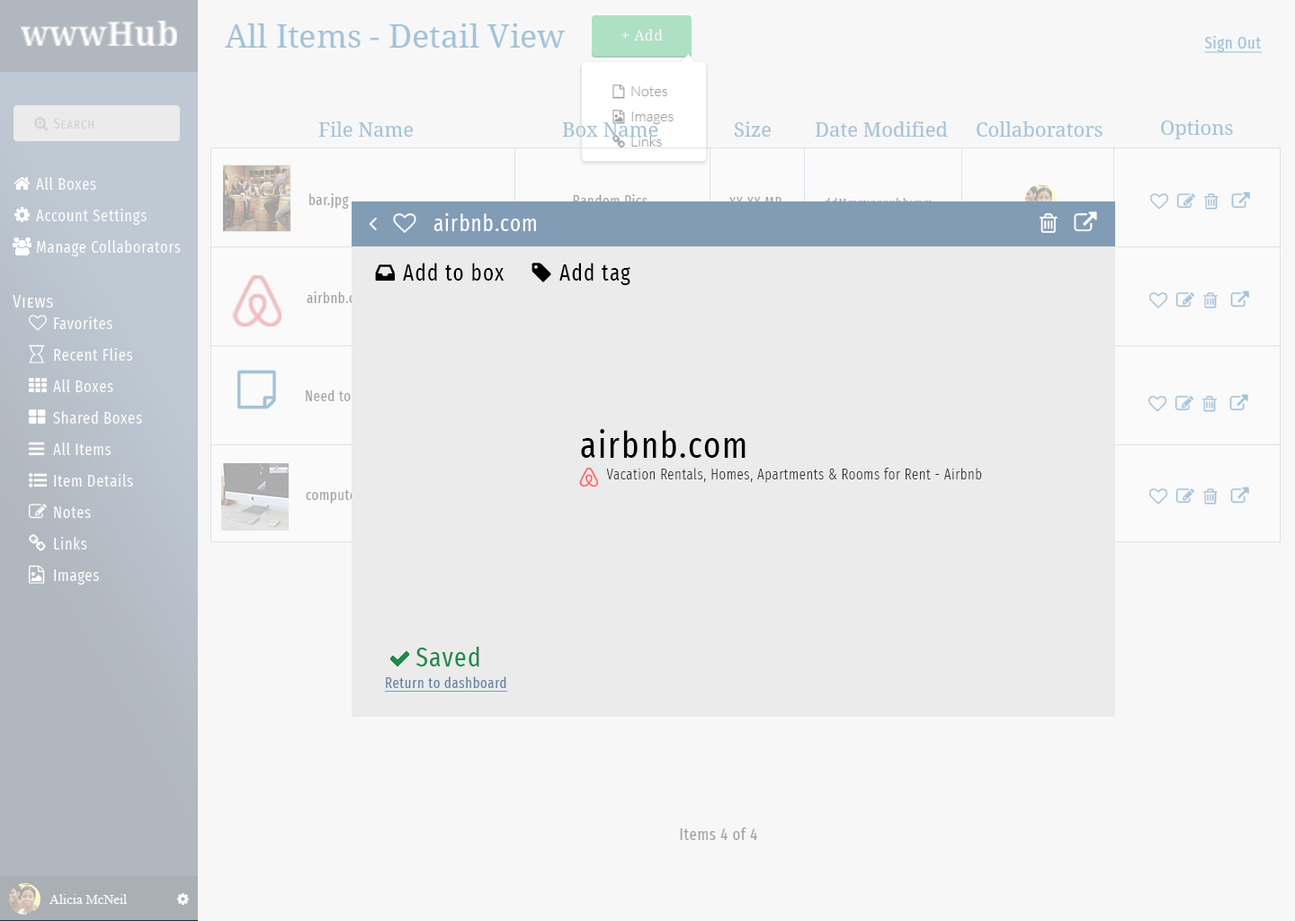
<style>
.page{position:relative;width:1295px;height:921px;background:#f7f7f7}
.page>*{position:absolute;margin:0}
.t1{font:32.4px "DroidSerif";color:#9fc4dc}
.t2{font:14.4px "DroidSerif";letter-spacing:0.04em;color:#ffffff}
.t3{font:14.4px/25.2px "Lato-Light";color:#9f9f9f}
.t4{font:19.8px "DroidSerif";color:#9fc4dc}
.t5{font:14.4px "FiraSansExtraCondensed-Regular";letter-spacing:0.04em;color:#9f9f9f}
.t6{font:14.4px "FiraSansExtraCondensed-Regular";letter-spacing:0.04em}
.t7{font:13.5px "FiraSansExtraCondensed-Regular";letter-spacing:0.04em;color:#829cb5}
.t8{font:22.5px "FiraSansExtraCondensed-Regular";letter-spacing:0.05em;color:#ffffff}
.t9{font:22.5px "FiraSansExtraCondensed-Regular";letter-spacing:0.05em;color:#000000}
.t10{font:36px "FiraSansExtraCondensed-Regular";letter-spacing:0.05em;color:#000000}
.t11{font:14.4px "FiraSansExtraCondensed-Light";letter-spacing:0.04em;color:#333333}
.t12{font:27px "FiraSansExtraCondensed-Regular";letter-spacing:0.04em;color:#22894e}
.t13{font:14.4px "FiraSansExtraCondensed-Regular";letter-spacing:0.04em;color:#5f81a3;text-decoration:underline}
.t14{font:16.2px "FiraSansExtraCondensed-Regular";letter-spacing:0.04em;color:#9f9f9f}
.t15{font:13.5px "TimesNewRomanPSMT";color:#ffffff}
</style>
<div class="page">
<p class="t1" style="left:225px;top:23px;width:340px;height:25px">All Items - Detail View</p>
<p class="t2" style="left:621px;top:29px;width:42px;height:12px">+ Add</p>
<p class="t3" style="left:631px;top:86px;width:43px;height:61px">Notes<br>Images<br>Links</p>
<p class="t4" style="left:318px;top:121px;width:95px;height:16px">File Name</p>
<p class="t4" style="left:562px;top:122px;width:96px;height:15px">Box Name</p>
<p class="t4" style="left:734px;top:121px;width:37px;height:16px">Size</p>
<p class="t4" style="left:815px;top:121px;width:133px;height:16px">Date Modified</p>
<p class="t4" style="left:977px;top:121px;width:125px;height:16px">Collaborators</p>
<p class="t4" style="left:1161px;top:120px;width:72px;height:19px">Options</p>
<p class="t5" style="left:309px;top:193px;width:40px;height:16px">bar.jpg</p>
<p class="t6" style="left:573px;top:194px;width:74px;height:12px">Random Pics</p>
<p class="t6" style="left:729px;top:197px;width:53px;height:11px">XX.XX MB</p>
<p class="t7" style="left:824px;top:198px;width:109px;height:12px">ddMmmyyyy:hh:mm</p>
<p class="t8" style="left:433px;top:213px;width:103px;height:18px">airbnb.com</p>
<p class="t9" style="left:403px;top:263px;width:101px;height:18px">Add to box</p>
<p class="t9" style="left:559px;top:263px;width:71px;height:22px">Add tag</p>
<p class="t5" style="left:307px;top:291px;width:65px;height:12px">airbnb.com</p>
<p class="t6" style="left:306px;top:389px;width:137px;height:16px">Need to find a designer</p>
<p class="t10" style="left:581px;top:429px;width:164px;height:29px">airbnb.com</p>
<p class="t11" style="left:606px;top:468px;width:376px;height:15px">Vacation Rentals, Homes, Apartments &amp; Rooms for Rent - Airbnb</p>
<p class="t6" style="left:306px;top:490px;width:81px;height:14px">computer.png</p>
<p class="t12" style="left:416px;top:646px;width:63px;height:20px">Saved</p>
<p class="t13" style="left:385px;top:676px;width:123px;height:16px">Return to dashboard</p>
<p class="t14" style="left:680px;top:827px;width:77px;height:13px">Items 4 of 4</p>
<p class="t15" style="left:49px;top:894px;width:78px;height:10px">Alicia McNeil</p>
</div>
